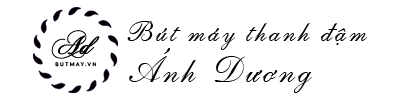
<style>
.page{position:relative;width:400px;height:100px;background:#ffffff}
.page>*{position:absolute;margin:0}
.t1{font:26.6px "ChopinScript";color:#000000;font-weight:bold;font-style:italic}
.t2{font:28.6px "UVNKeChuyen1";letter-spacing:0.1em;color:#000000}
.t3{font:35.9px "UVNKeChuyen1";letter-spacing:0.1em;color:#000000}
.t4{font:5.1px "Lato-Regular";letter-spacing:0.3em;color:#000000}
</style>
<div class="page">
<p class="t1" style="left:51px;top:30px;width:49px;height:29px">Ad</p>
<p class="t2" style="left:127px;top:21px;width:241px;height:29px">Bút máy thanh đậm</p>
<p class="t3" style="left:129px;top:48px;width:183px;height:45px">Ánh Dương</p>
<p class="t4" style="left:55px;top:62px;width:41px;height:5px">BUTMAY.VN</p>
</div>
